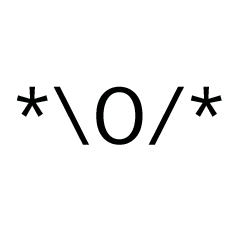
<style>
.page{position:relative;width:234px;height:234px;background:#ffffff}
.page>*{position:absolute;margin:0}
.t1{font:72px "Sathu";letter-spacing:0.025em;color:#000101}
</style>
<div class="page">
<p class="t1" style="left:16px;top:86px;width:206px;height:59px">*\O/*</p>
</div>
